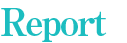
<style>
.page{position:relative;width:127px;height:43px;background:#ffffff}
.page>*{position:absolute;margin:0}
.t1{font:37px "RyuminPro-ExBold";letter-spacing:-0.08em;color:#1cbdc0}
</style>
<div class="page">
<p class="t1" style="left:1px;top:8px;width:106px;height:34px">Report</p>
</div>
